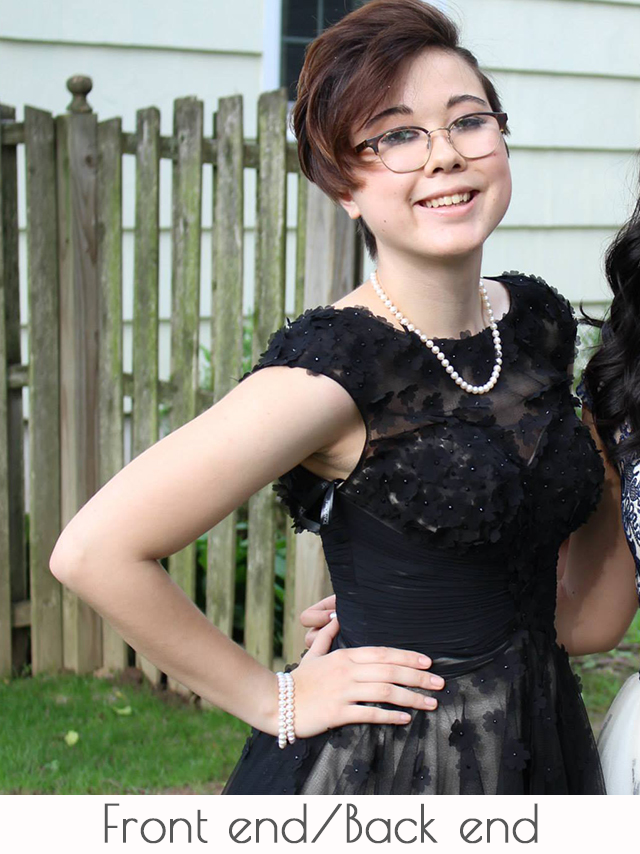
<style>
.page{position:relative;width:640px;height:854px}
.page>*{position:absolute;margin:0}
.t1{font:51.2px "PoiretOne-Regular";letter-spacing:0.005em;color:#575757;font-weight:bold;scale:0.96 1}
</style>
<div class="page">
<p class="t1" style="left:104px;top:803px;width:434px;height:41px">Front end/Back end</p>
</div>
